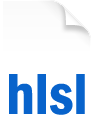
<style>
.page{position:relative;width:94px;height:120px;background:#ffffff}
.page>*{position:absolute;margin:0}
.t1{font:60px "FranklinGothic-DemiCond";color:#0863cb}
</style>
<div class="page">
<p class="t1" style="left:9px;top:74px;width:76px;height:41px">hlsl</p>
</div>
